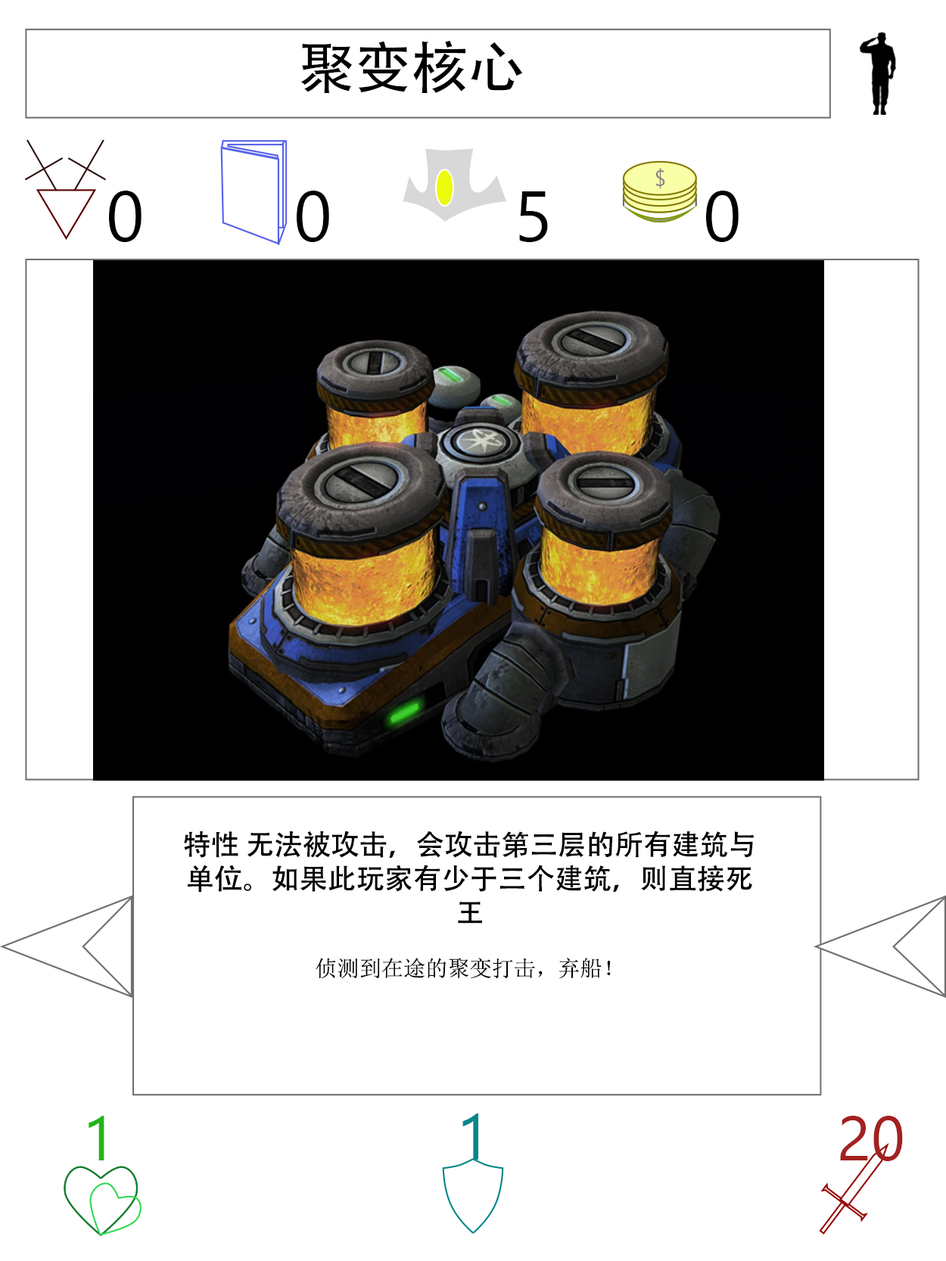
<style>
.page{position:relative;width:946px;height:1261px;background:#ffffff}
.page>*{position:absolute;margin:0}
.t1{font:56.7px "AdobeHeitiStd-Regular";color:#000000}
.t2{font:70.9px "SegoeUI";color:#000000}
.t3{font:28.4px "AdobeHeitiStd-Regular";color:#000000}
.t4{font:22.1px "NSimSun";color:#000000}
.t5{font:63px "SegoeUI";color:#22b518}
.t6{font:64.6px "SegoeUI";color:#05868a}
.t7{font:63px "SegoeUI";color:#a32020}
</style>
<div class="page">
<p class="t1" style="left:300px;top:40px;width:223px;height:53px">聚变核心</p>
<p class="t2" style="left:109px;top:191px;width:32px;height:51px">0</p>
<p class="t2" style="left:297px;top:191px;width:32px;height:51px">0</p>
<p class="t2" style="left:519px;top:191px;width:29px;height:51px">5</p>
<p class="t2" style="left:706px;top:191px;width:32px;height:51px">0</p>
<p class="t3" style="left:184px;top:831px;width:569px;height:148px;text-align:center">特性 无法被攻击，会攻击第三层的所有建筑与单位。如果此玩家有少于三个建筑，则直接死王<br><span class="t4"><br>侦测到在途的聚变打击，弃船！</span></p>
<p class="t5" style="left:89px;top:1116px;width:15px;height:44px">1</p>
<p class="t6" style="left:462px;top:1114px;width:16px;height:46px">1</p>
<p class="t7" style="left:840px;top:1116px;width:62px;height:45px">20</p>
</div>
